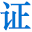
<style>
.page{position:relative;width:32px;height:32px;background:#ffffff}
.page>*{position:absolute;margin:0}
.t1{font:32px "STZhongsong";color:#0072d2;font-weight:bold}
</style>
<div class="page">
<p class="t1" style="left:0px;top:1px;width:31px;height:30px">证</p>
</div>
